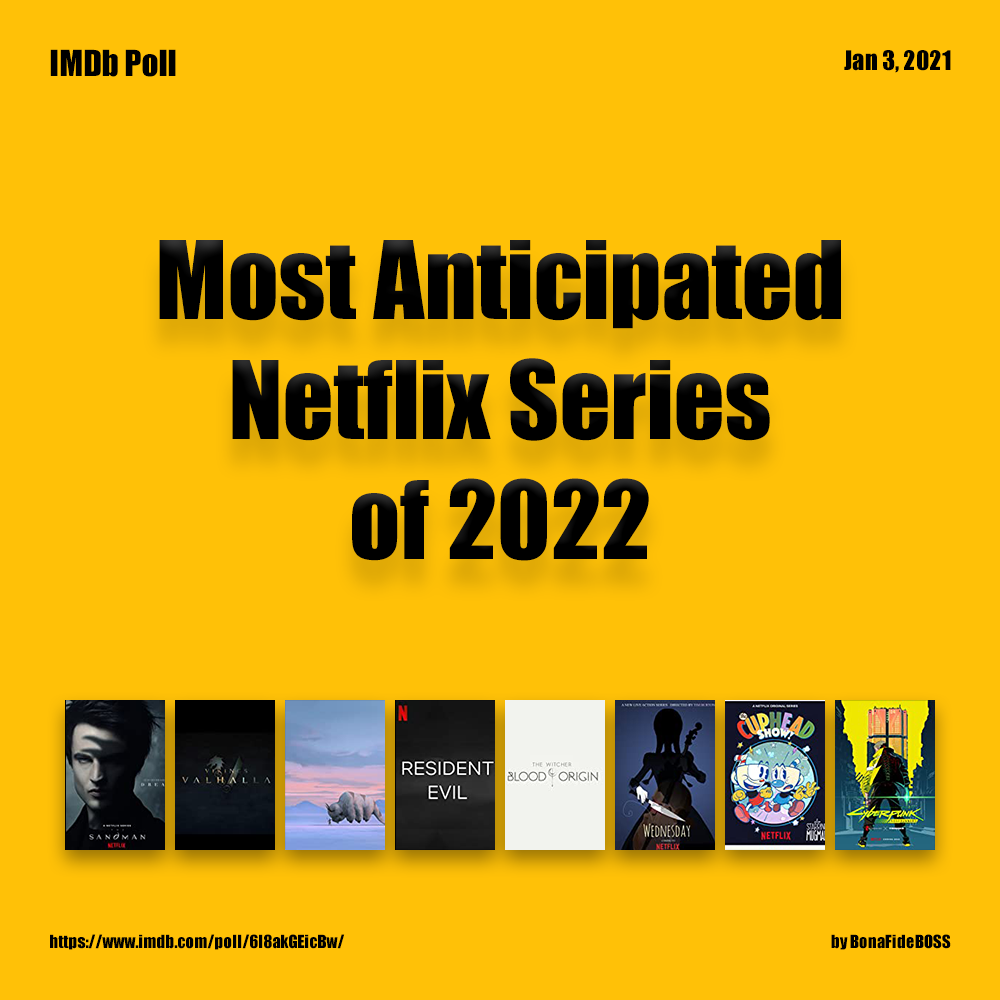
<style>
.page{position:relative;width:1000px;height:1000px;background:#ffc107}
.page>*{position:absolute;margin:0}
.t1{font:33.3px "Impact";color:#000000}
.t2{font:25px "Impact";color:#000000}
.t3{font:100px "Impact";color:#000000}
.t4{font:16.7px "Impact";color:#000000}
</style>
<div class="page">
<p class="t1" style="left:50px;top:49px;width:126px;height:28px">IMDb Poll</p>
<p class="t2" style="left:844px;top:50px;width:107px;height:23px">Jan 3, 2021</p>
<p class="t3" style="left:159px;top:240px;width:682px;height:321px;text-align:center">Most Anticipated<br>Netflix Series<br>of 2022</p>
<p class="t4" style="left:50px;top:934px;width:295px;height:16px">https://www.imdb.com/poll/6l8akGEicBw/</p>
<p class="t4" style="left:831px;top:934px;width:120px;height:16px">by BonaFideBOSS</p>
</div>
